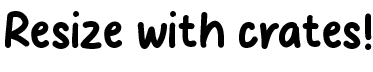
<style>
.page{position:relative;width:373px;height:72px;background:#ffffff}
.page>*{position:absolute;margin:0}
.t1{font:50px "CheeseMatcha";color:#000000}
</style>
<div class="page">
<p class="t1" style="left:5px;top:11px;width:367px;height:39px">Resize with crates!</p>
</div>
